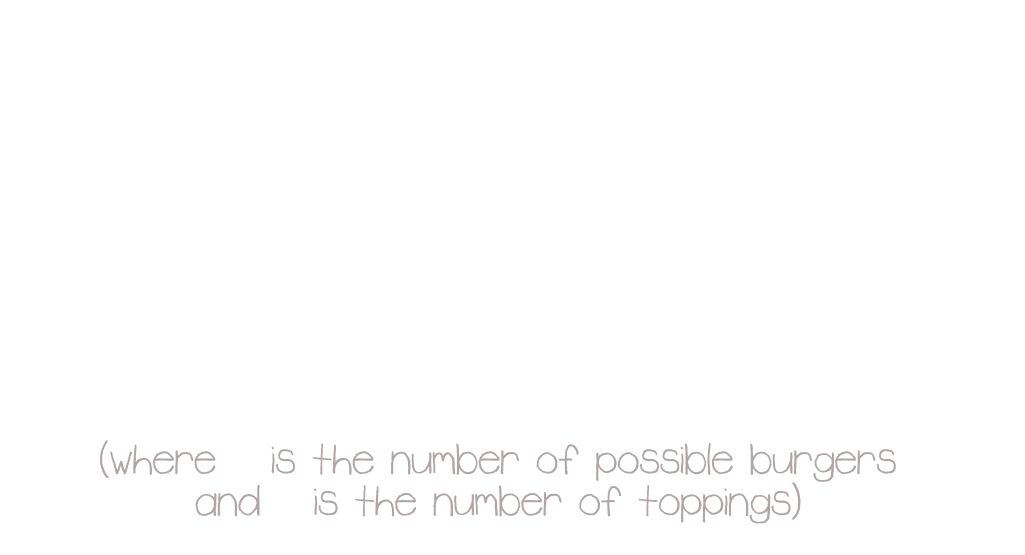
<style>
.page{position:relative;width:1025px;height:555px;background:#ffffff}
.page>*{position:absolute;margin:0}
.t1{font:50px/41.7px "Rudiment";color:#b1a6a6}
.t2{font:50px/41.7px "Rudiment";color:#ffffff}
</style>
<div class="page">
<p class="t1" style="left:100px;top:440px;width:796px;height:84px;text-align:center">(where <span class="t2">b </span>is the number of possible burgers<br>and<span class="t2"> n </span>is the number of toppings)</p>
</div>
